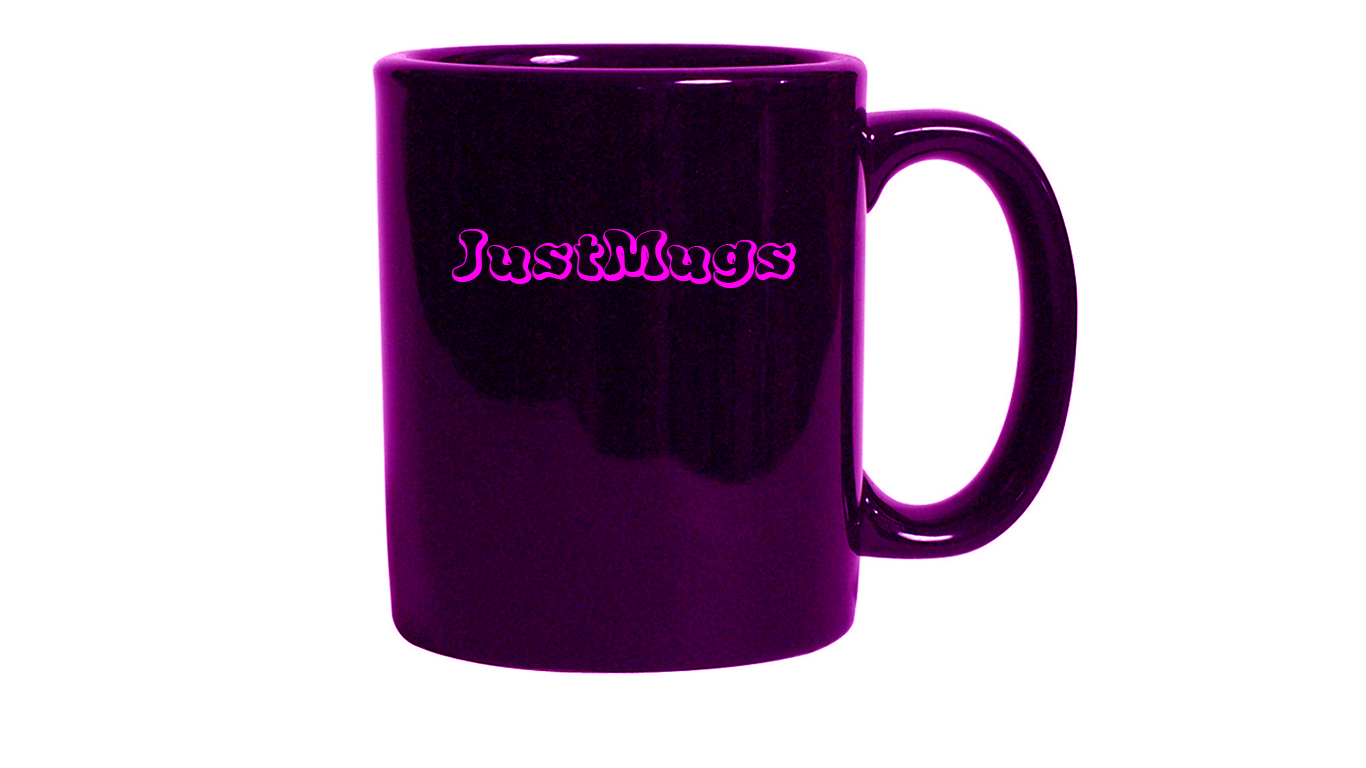
<style>
.page{position:relative;width:1366px;height:768px;background:#ffffff}
.page>*{position:absolute;margin:0}
.t1{font:60px "CandyPop!";color:#ff00f0}
</style>
<div class="page">
<p class="t1" style="left:452px;top:229px;width:344px;height:59px">JustMugs</p>
</div>
